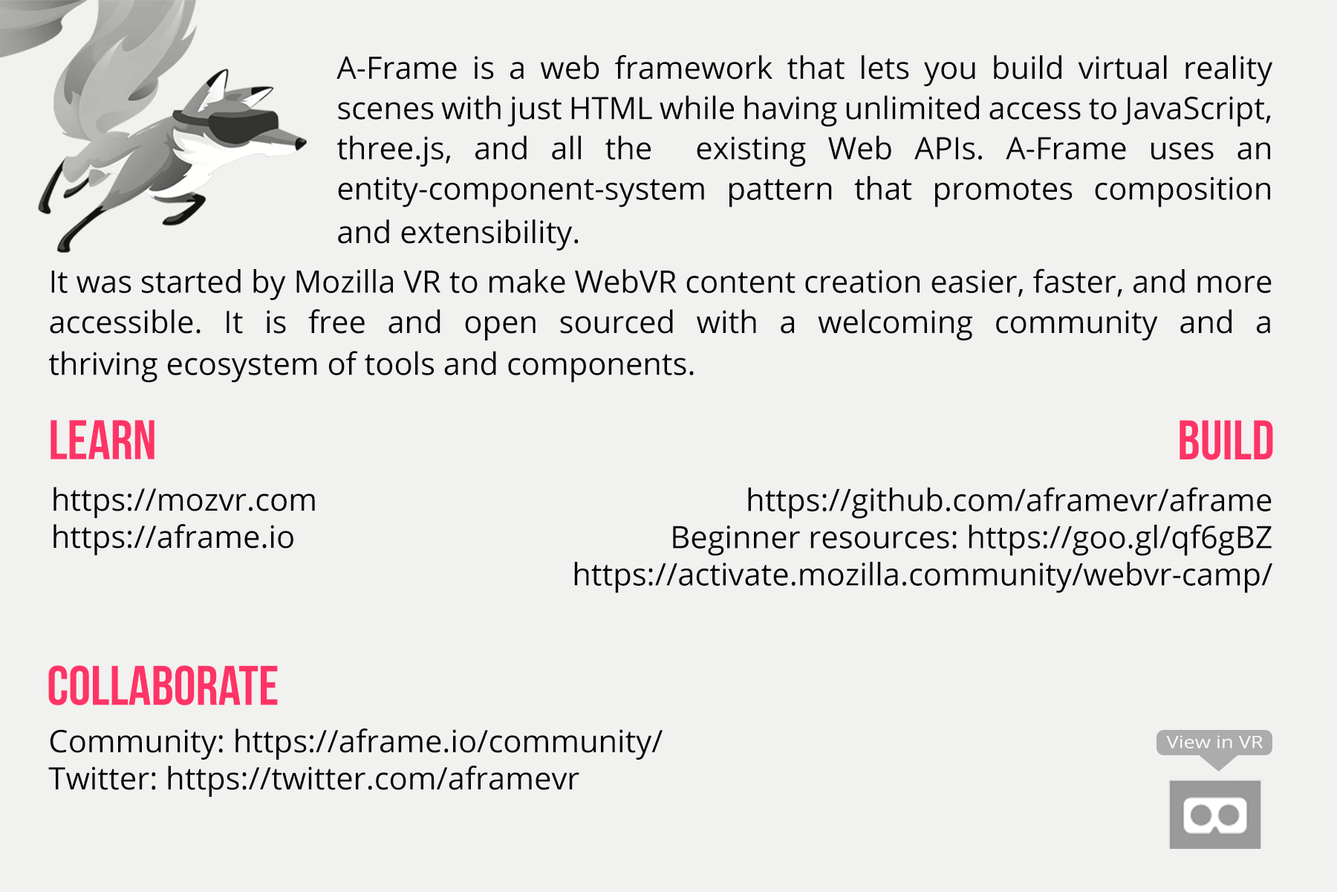
<style>
.page{position:relative;width:1337px;height:892px;background:#f1f1f0}
.page>*{position:absolute;margin:0}
.t1{font:31px/40.2px "OpenSans";color:#050505}
.t2{font:31px "OpenSans";color:#050505}
.t3{font:55.7px "BebasNeue";color:#fe3467}
.t4{font:17.3px "OpenSans";color:#fbfafa;scale:1.17 1}
</style>
<div class="page">
<p class="t1" style="left:337px;top:55px;width:937px;height:152px;text-align:justify">A-Frame is a web framework that lets you build virtual reality scenes with just HTML while having unlimited access to JavaScript, three.js, and all the  existing Web APIs. A-Frame uses an entity-component-system pattern that promotes composition</p>
<p class="t2" style="left:338px;top:219px;width:241px;height:31px">and extensibility.</p>
<p class="t1" style="left:50px;top:268px;width:1222px;height:72px;text-align:justify">It was started by Mozilla VR to make WebVR content creation easier, faster, and more accessible. It is free and open sourced with a welcoming community and a</p>
<p class="t2" style="left:49px;top:351px;width:645px;height:32px">thriving ecosystem of tools and components.</p>
<p class="t3" style="left:51px;top:420px;width:104px;height:39px">Learn</p>
<p class="t3" style="left:1180px;top:420px;width:94px;height:40px">BUILD</p>
<p class="t2" style="left:53px;top:487px;width:262px;height:68px">https://mozvr.com<br>https://aframe.io</p>
<p class="t2" style="left:574px;top:487px;width:699px;height:106px;text-align:right">https://github.com/aframevr/aframe<br>Beginner resources: https://goo.gl/qf6gBZ<br>https://activate.mozilla.community/webvr-camp/</p>
<p class="t3" style="left:48px;top:665px;width:230px;height:40px">Collaborate</p>
<p class="t2" style="left:48px;top:728px;width:615px;height:68px">Community: https://aframe.io/community/<br>Twitter: https://twitter.com/aframevr</p>
<p class="t4" style="left:1167px;top:735px;width:96px;height:13px">View in VR</p>
</div>
